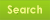
<style>
.page{position:relative;width:50px;height:20px}
.page>*{position:absolute;margin:0}
.t1{font:11.3px "CenturyGothic-Bold";color:#f2f688;scale:0.93 1}
</style>
<div class="page">
<p class="t1" style="left:7px;top:5px;width:35px;height:9px">Search</p>
</div>
